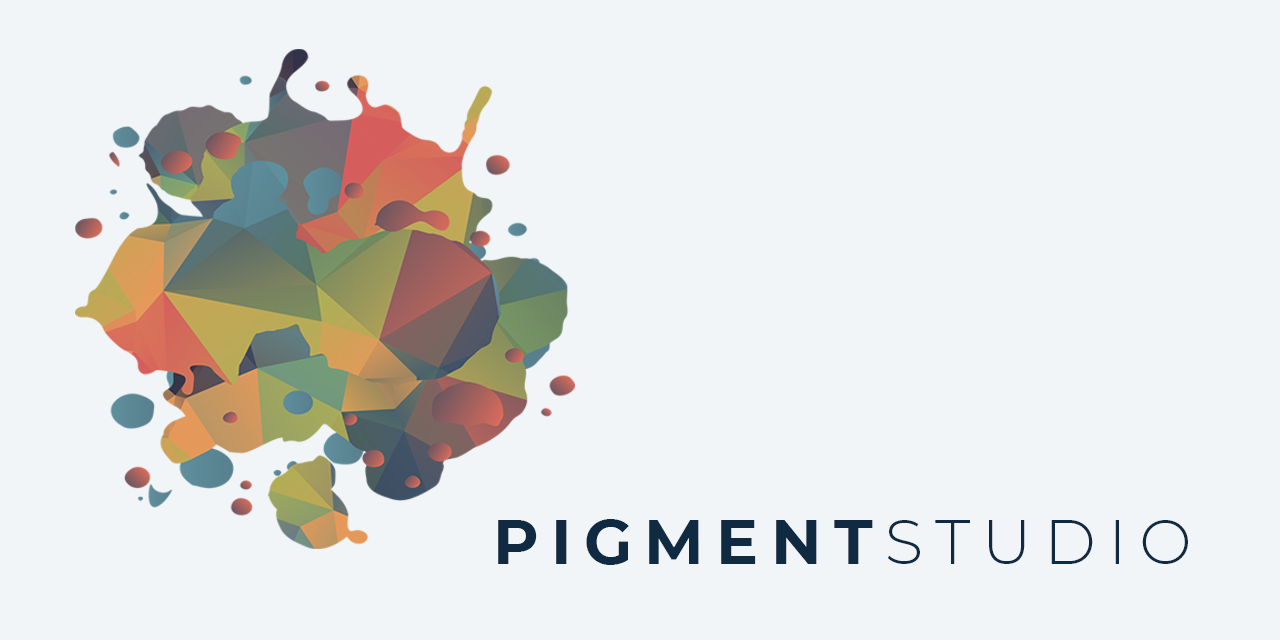
<style>
.page{position:relative;width:1280px;height:640px;background:#f1f5f8}
.page>*{position:absolute;margin:0}
.t1{font:62.5px "Montserrat-Bold";letter-spacing:0.2em;color:#102a42}
.t2{font:62.5px "Montserrat-Light";letter-spacing:0.2em;color:#102a42}
</style>
<div class="page">
<p class="t1" style="left:498px;top:519px;width:690px;height:46px">PIGMENT<span class="t2">STUDIO</span></p>
</div>
